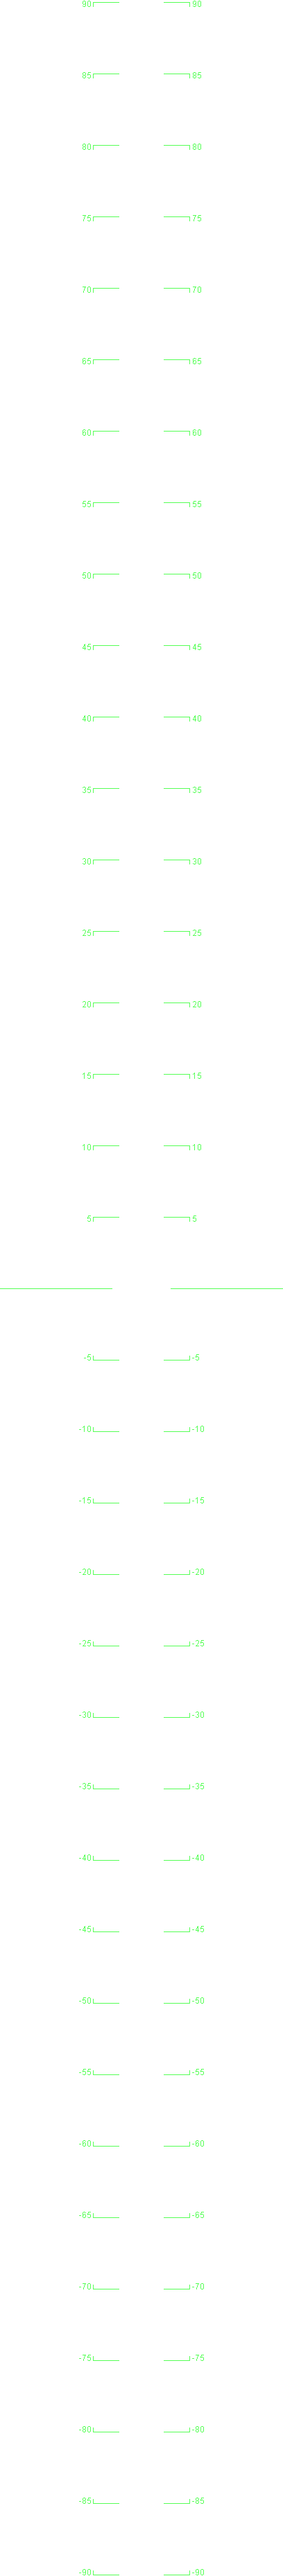
<style>
.page{position:relative;width:283px;height:2576px;background:#ffffff}
.page>*{position:absolute;margin:0}
.t1{font:8.2px "ArialMT";color:#55ff55;scale:1.03 1}
</style>
<div class="page">
<p class="t1" style="left:83px;top:1px;width:8px;height:6px">90</p>
<p class="t1" style="left:193px;top:1px;width:8px;height:6px">90</p>
<p class="t1" style="left:83px;top:72px;width:8px;height:6px">85</p>
<p class="t1" style="left:193px;top:72px;width:8px;height:6px">85</p>
<p class="t1" style="left:83px;top:144px;width:8px;height:6px">80</p>
<p class="t1" style="left:193px;top:144px;width:8px;height:6px">80</p>
<p class="t1" style="left:83px;top:215px;width:8px;height:6px">75</p>
<p class="t1" style="left:193px;top:215px;width:8px;height:6px">75</p>
<p class="t1" style="left:83px;top:287px;width:8px;height:6px">70</p>
<p class="t1" style="left:193px;top:287px;width:8px;height:6px">70</p>
<p class="t1" style="left:83px;top:358px;width:8px;height:6px">65</p>
<p class="t1" style="left:193px;top:358px;width:8px;height:6px">65</p>
<p class="t1" style="left:83px;top:429px;width:8px;height:7px">60</p>
<p class="t1" style="left:193px;top:429px;width:8px;height:7px">60</p>
<p class="t1" style="left:83px;top:501px;width:8px;height:6px">55</p>
<p class="t1" style="left:193px;top:501px;width:8px;height:6px">55</p>
<p class="t1" style="left:83px;top:572px;width:8px;height:7px">50</p>
<p class="t1" style="left:193px;top:572px;width:8px;height:7px">50</p>
<p class="t1" style="left:83px;top:644px;width:8px;height:6px">45</p>
<p class="t1" style="left:193px;top:644px;width:8px;height:6px">45</p>
<p class="t1" style="left:83px;top:715px;width:8px;height:7px">40</p>
<p class="t1" style="left:193px;top:715px;width:8px;height:7px">40</p>
<p class="t1" style="left:83px;top:787px;width:8px;height:6px">35</p>
<p class="t1" style="left:193px;top:787px;width:8px;height:6px">35</p>
<p class="t1" style="left:83px;top:858px;width:8px;height:6px">30</p>
<p class="t1" style="left:193px;top:858px;width:8px;height:6px">30</p>
<p class="t1" style="left:83px;top:930px;width:8px;height:6px">25</p>
<p class="t1" style="left:193px;top:930px;width:8px;height:6px">25</p>
<p class="t1" style="left:83px;top:1001px;width:8px;height:6px">20</p>
<p class="t1" style="left:193px;top:1001px;width:8px;height:6px">20</p>
<p class="t1" style="left:83px;top:1073px;width:8px;height:6px">15</p>
<p class="t1" style="left:193px;top:1073px;width:8px;height:6px">15</p>
<p class="t1" style="left:83px;top:1144px;width:8px;height:6px">10</p>
<p class="t1" style="left:193px;top:1144px;width:8px;height:6px">10</p>
<p class="t1" style="left:87px;top:1216px;width:4px;height:6px">5</p>
<p class="t1" style="left:193px;top:1216px;width:3px;height:6px">5</p>
<p class="t1" style="left:84px;top:1354px;width:7px;height:6px">-5</p>
<p class="t1" style="left:192px;top:1354px;width:7px;height:6px">-5</p>
<p class="t1" style="left:79px;top:1426px;width:12px;height:6px">-10</p>
<p class="t1" style="left:192px;top:1426px;width:12px;height:6px">-10</p>
<p class="t1" style="left:79px;top:1497px;width:12px;height:6px">-15</p>
<p class="t1" style="left:192px;top:1497px;width:12px;height:6px">-15</p>
<p class="t1" style="left:79px;top:1569px;width:12px;height:6px">-20</p>
<p class="t1" style="left:192px;top:1569px;width:12px;height:6px">-20</p>
<p class="t1" style="left:79px;top:1640px;width:12px;height:6px">-25</p>
<p class="t1" style="left:192px;top:1640px;width:12px;height:6px">-25</p>
<p class="t1" style="left:79px;top:1712px;width:12px;height:6px">-30</p>
<p class="t1" style="left:192px;top:1712px;width:12px;height:6px">-30</p>
<p class="t1" style="left:79px;top:1783px;width:12px;height:6px">-35</p>
<p class="t1" style="left:192px;top:1783px;width:12px;height:6px">-35</p>
<p class="t1" style="left:79px;top:1854px;width:12px;height:7px">-40</p>
<p class="t1" style="left:192px;top:1854px;width:12px;height:7px">-40</p>
<p class="t1" style="left:79px;top:1926px;width:12px;height:6px">-45</p>
<p class="t1" style="left:192px;top:1926px;width:12px;height:6px">-45</p>
<p class="t1" style="left:79px;top:1997px;width:12px;height:7px">-50</p>
<p class="t1" style="left:192px;top:1997px;width:12px;height:7px">-50</p>
<p class="t1" style="left:79px;top:2069px;width:12px;height:6px">-55</p>
<p class="t1" style="left:192px;top:2069px;width:12px;height:6px">-55</p>
<p class="t1" style="left:79px;top:2140px;width:12px;height:7px">-60</p>
<p class="t1" style="left:192px;top:2140px;width:12px;height:7px">-60</p>
<p class="t1" style="left:79px;top:2212px;width:12px;height:6px">-65</p>
<p class="t1" style="left:192px;top:2212px;width:12px;height:6px">-65</p>
<p class="t1" style="left:79px;top:2283px;width:12px;height:6px">-70</p>
<p class="t1" style="left:192px;top:2283px;width:12px;height:6px">-70</p>
<p class="t1" style="left:79px;top:2355px;width:12px;height:6px">-75</p>
<p class="t1" style="left:192px;top:2355px;width:12px;height:6px">-75</p>
<p class="t1" style="left:79px;top:2426px;width:12px;height:6px">-80</p>
<p class="t1" style="left:192px;top:2426px;width:12px;height:6px">-80</p>
<p class="t1" style="left:79px;top:2498px;width:12px;height:6px">-85</p>
<p class="t1" style="left:192px;top:2498px;width:12px;height:6px">-85</p>
<p class="t1" style="left:79px;top:2569px;width:12px;height:6px">-90</p>
<p class="t1" style="left:192px;top:2569px;width:12px;height:6px">-90</p>
</div>
